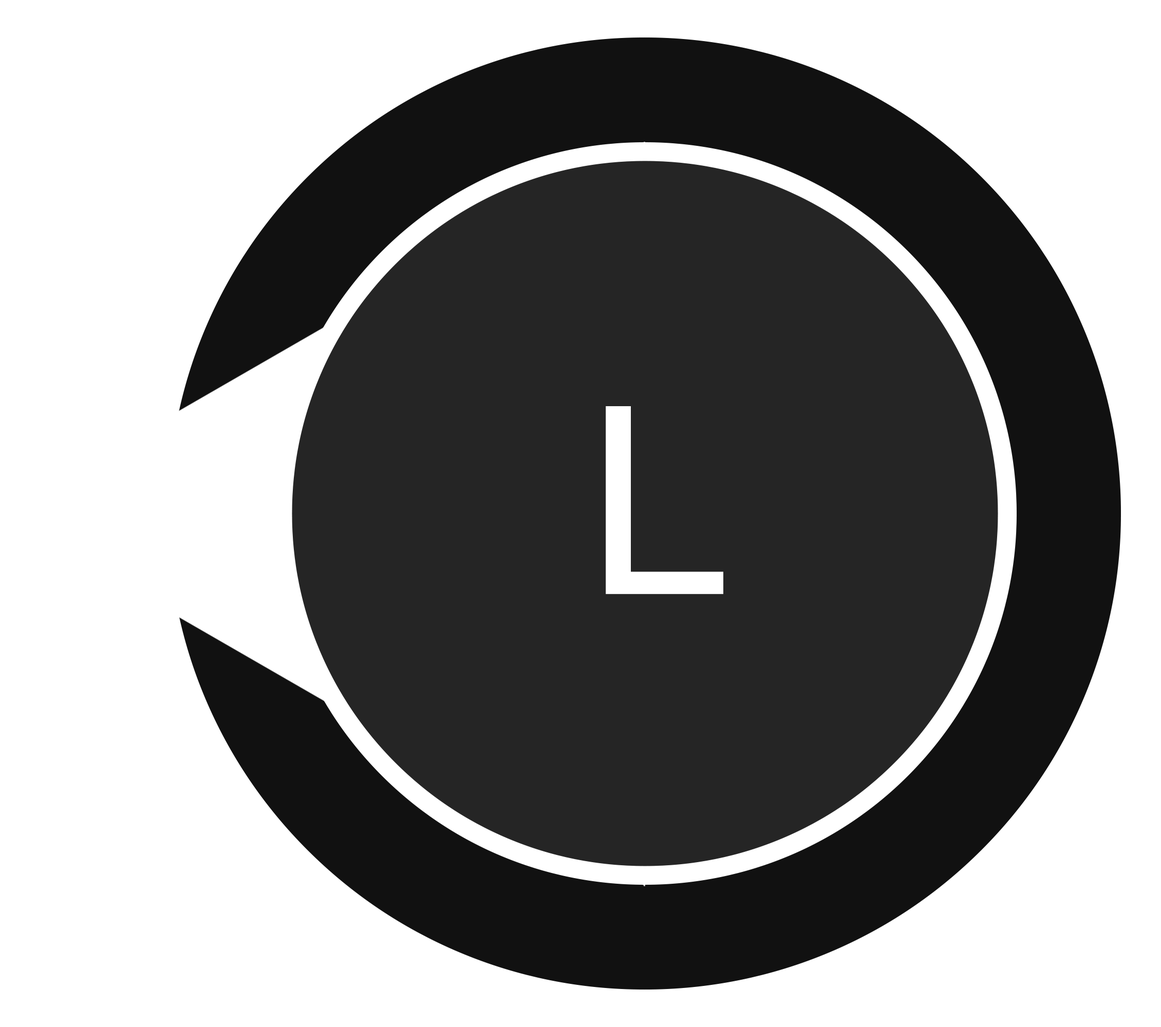
<style>
.page{position:relative;width:1161px;height:1027px;background:#ffffff}
.page>*{position:absolute;margin:0}
.t1{font:262.3px "ArialMT";color:#ffffff}
</style>
<div class="page">
<p class="t1" style="left:606px;top:406px;width:117px;height:188px">L</p>
</div>
